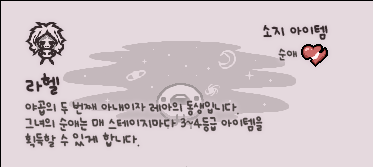
<style>
.page{position:relative;width:373px;height:167px;background:#e5d9de}
.page>*{position:absolute;margin:0}
.t1{font:12px "UhBeeSe_hyunBold";color:#372b2d}
.t2{font:12px "UhBeeSe_hyunBold";letter-spacing:-0.1em;color:#372b2d}
.t3{font:10px "UhBeeSe_hyunBold";color:#4c4442}
.t4{font:11px/16px "UhBeeSe_hyunBold";letter-spacing:-0.025em;color:#4c4442}
.t5{font:16px/25px "UhBeeSe_hyunBold";letter-spacing:-0.15em;color:#372b2d}
.t6{font:16px/23px "UhBeeSe_hyunBold";color:#372b2d}
.t7{font:11px/16px "UhBeeSe_hyun";letter-spacing:-0.025em;color:#4c4442}
.t8{font:11px/16px "UhBeeSe_hyunBold";letter-spacing:-0.1em;color:#4c4442}
</style>
<div class="page">
<p class="t1" style="left:263px;top:25px;width:65px;height:15px"><span class="t2">소</span>지 아이템</p>
<p class="t3" style="left:278px;top:48px;width:20px;height:13px">순애</p>
<p class="t4" style="left:25px;top:73px;width:238px;height:75px"><span class="t5">라</span><span class="t6">헬<br></span>야<span class="t7">곱</span>의 두 번째 아내이<span class="t8">자 </span>레아의 동생입니다. <br>그녀의 순애는 매 스테이지마다 3~4등급 아이템을<br>획득할 수 있게 합니다.</p>
</div>
